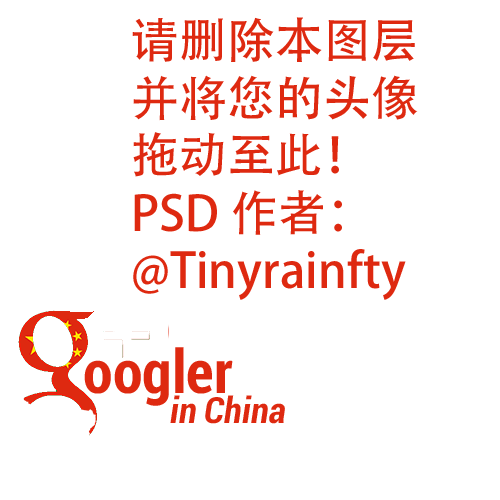
<style>
.page{position:relative;width:500px;height:500px;background:#ffffff}
.page>*{position:absolute;margin:0}
.t1{font:48px "AdobeHeitiStd-Regular";color:#de2910}
.t2{font:60px "Roboto-BoldCondensed";color:#de2910}
.t3{font:36px "Roboto-BoldCondensedItalic";color:#de2910}
</style>
<div class="page">
<p class="t1" style="left:132px;top:17px;width:286px;height:283px">请删除本图层<br>并将您的头像<br>拖动至此！<br>PSD 作者：<br>@Tinyrainfty</p>
<p class="t2" style="left:84px;top:347px;width:149px;height:59px">oogler</p>
<p class="t3" style="left:170px;top:395px;width:115px;height:29px">in China</p>
</div>
